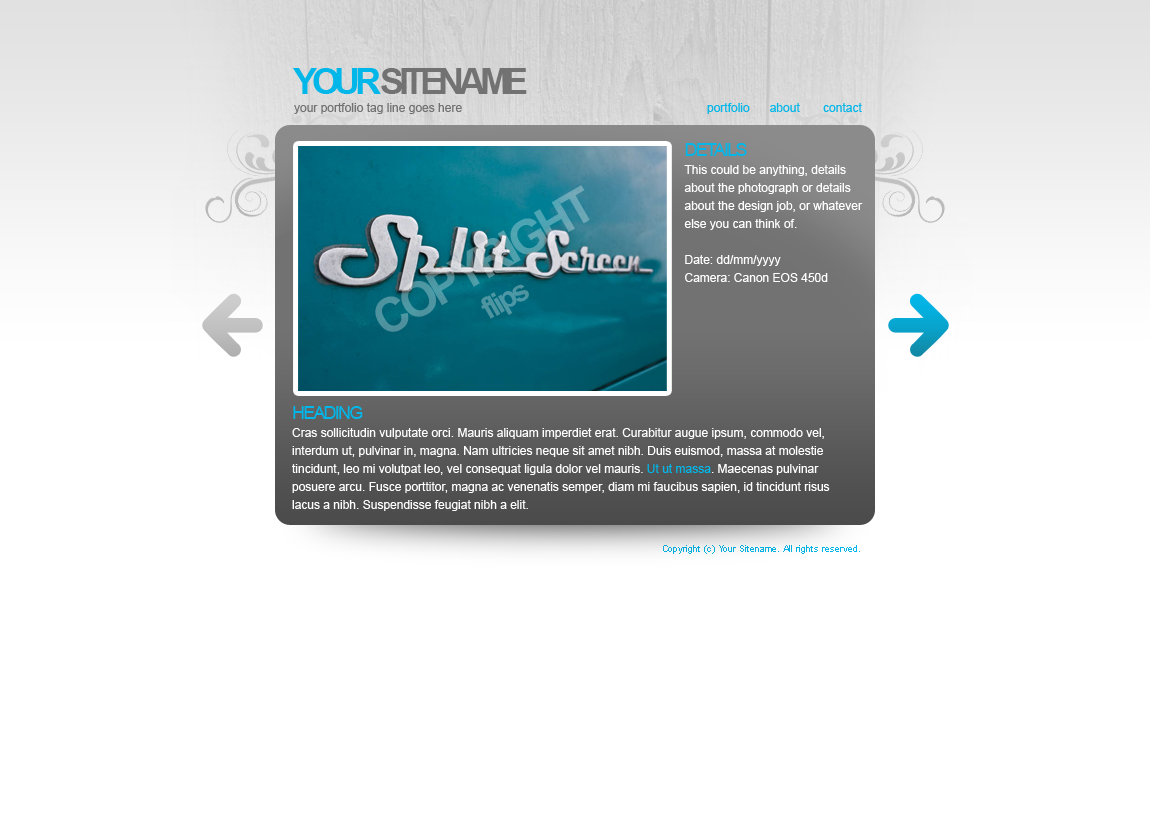
<style>
.page{position:relative;width:1150px;height:820px;background:#ffffff}
.page>*{position:absolute;margin:0}
.t1{font:36px "Arial-BoldMT";letter-spacing:-0.15em;color:#727272}
.t2{font:36px "Arial-BoldMT";letter-spacing:-0.15em;color:#01b6e8}
.t3{font:12px "ArialMT";color:#727272}
.t4{font:12px "ArialMT";color:#01b6e8}
.t5{font:12px/18px "ArialMT";color:#ffffff}
.t6{font:18px/18px "ArialMT";letter-spacing:-0.1em;color:#01b6e8}
.t7{font:12px/18px "ArialMT";color:#01b6e8}
.t8{font:9px "ArialMT";color:#01b6e8}
</style>
<div class="page">
<p class="t1" style="left:293px;top:68px;width:234px;height:26px"><span class="t2">YOUR </span>SITENAME</p>
<p class="t3" style="left:294px;top:103px;width:168px;height:11px">your portfolio tag line goes here</p>
<p class="t4" style="left:707px;top:103px;width:155px;height:11px">portfolio      about       contact</p>
<p class="t5" style="left:684px;top:143px;width:179px;height:139px"><span class="t6">DETAILS<br></span>This could be anything, details<br>about the photograph or details<br>about the design job, or whatever<br>else you can think of.<br><br>Date: dd/mm/yyyy<br>Camera: Canon EOS 450d</p>
<p class="t5" style="left:292px;top:406px;width:538px;height:105px"><span class="t6">HEADING<br></span>Cras sollicitudin vulputate orci. Mauris aliquam imperdiet erat. Curabitur augue ipsum, commodo vel,<br>interdum ut, pulvinar in, magna. Nam ultricies neque sit amet nibh. Duis euismod, massa at molestie<br>tincidunt, leo mi volutpat leo, vel consequat ligula dolor vel mauris. <span class="t7">Ut ut massa</span>. Maecenas pulvinar<br>posuere arcu. Fusce porttitor, magna ac venenatis semper, diam mi faucibus sapien, id tincidunt risus<br>lacus a nibh. Suspendisse feugiat nibh a elit.</p>
<p class="t8" style="left:663px;top:545px;width:197px;height:9px">Copyright (c) Your Sitename. All rights reserved.</p>
</div>
